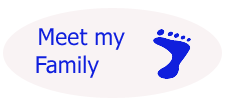
<style>
.page{position:relative;width:225px;height:100px;background:#f9f3f4}
.page>*{position:absolute;margin:0}
.t1{font:22.9px "Tahoma";color:#101fdd}
</style>
<div class="page">
<p class="t1" style="left:36px;top:28px;width:89px;height:50px;text-align:center">Meet my<br>          Family</p>
</div>
